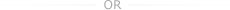
<style>
.page{position:relative;width:230px;height:10px;background:#ffffff}
.page>*{position:absolute;margin:0}
.t1{font:12px "Verdana";color:#aaaaaa}
</style>
<div class="page">
<p class="t1" style="left:104px;top:0px;width:18px;height:10px">OR</p>
</div>
